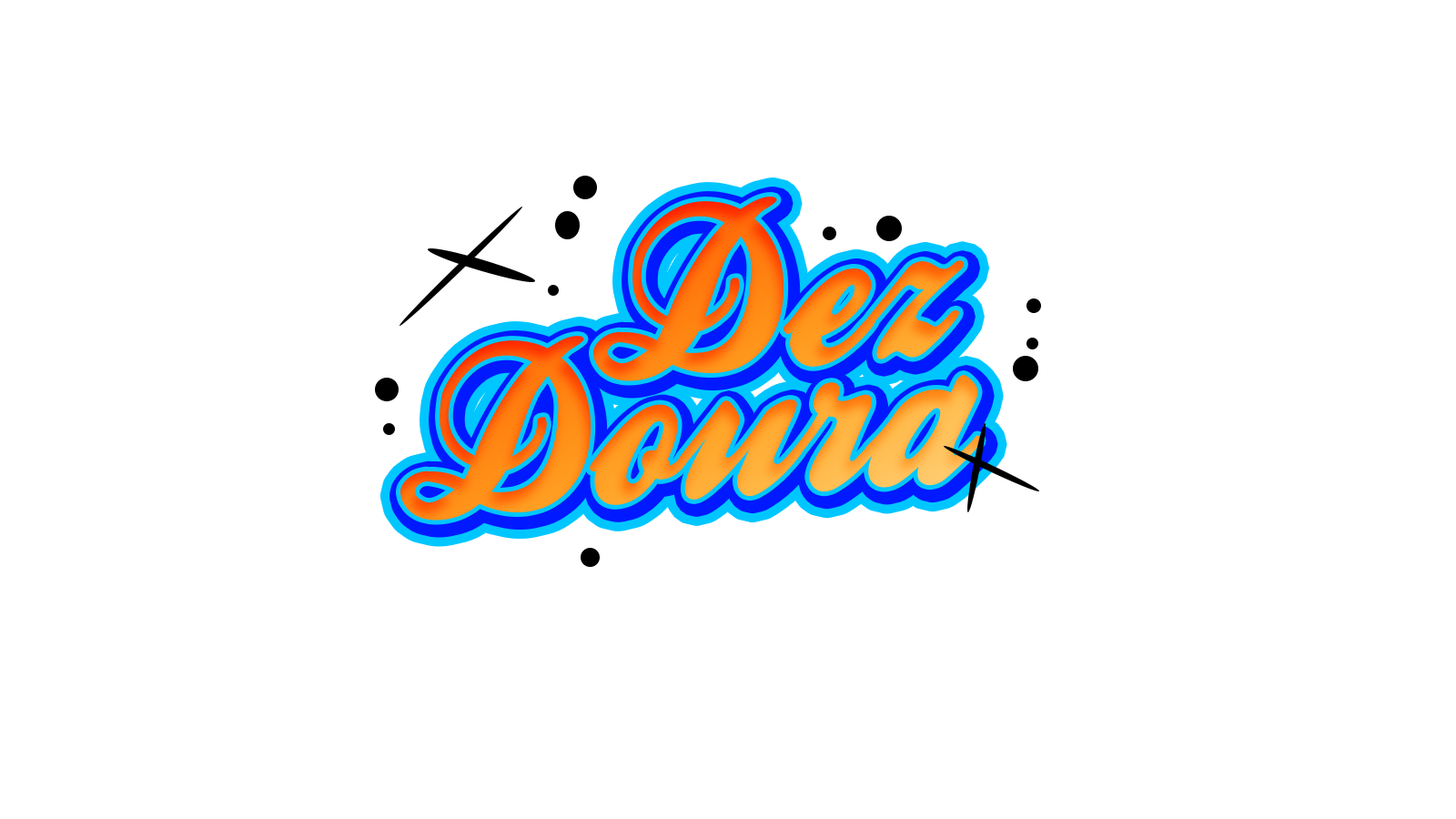
<style>
.page{position:relative;width:1456px;height:819px;background:#ffffff}
.page>*{position:absolute;margin:0}
.t1{font:227.5px "BallparkWeiner";scale:0.97 1}
</style>
<div class="page">
<p class="t1" style="left:593px;top:197px;width:371px;height:184px;rotate:-4deg">Dez</p>
<p class="t1" style="left:596px;top:200px;width:370px;height:185px;rotate:-4deg">Dez</p>
<p class="t1" style="left:596px;top:200px;width:370px;height:185px;rotate:-4deg">Dez</p>
<p class="t1" style="left:400px;top:336px;width:582px;height:185px;rotate:-4deg">Doura</p>
<p class="t1" style="left:403px;top:339px;width:582px;height:185px;rotate:-4deg">Doura</p>
<p class="t1" style="left:403px;top:339px;width:582px;height:185px;rotate:-4deg">Doura</p>
</div>
